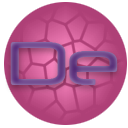
<style>
.page{position:relative;width:128px;height:128px;background:#ffffff}
.page>*{position:absolute;margin:0}
.t1{font:60px "Neuropol-Regular";color:#754f90}
</style>
<div class="page">
<p class="t1" style="left:10px;top:42px;width:108px;height:43px">De</p>
</div>
